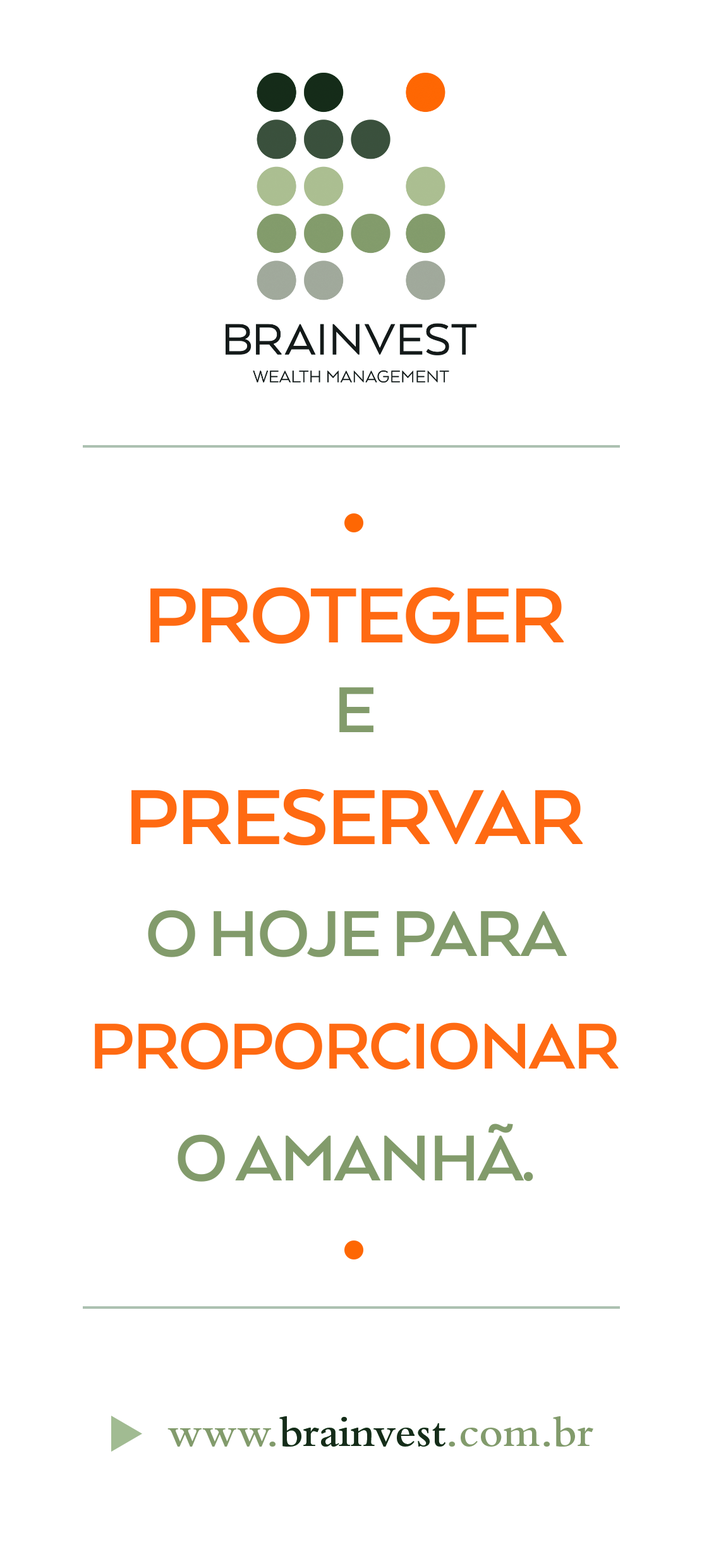
<style>
.page{position:relative;width:709px;height:1568px;background:#ffffff}
.page>*{position:absolute;margin:0}
.t1{font:74.7px/112px "ArquitectaBold";letter-spacing:-0.025em;color:#ff6a12;text-transform:uppercase}
.t2{font:59.7px/74.7px "BemboStd";color:#839c6c}
.t3{font:89.6px/89.6px "ArquitectaBold";letter-spacing:-0.025em;color:#ff6a12;text-transform:uppercase}
.t4{font:74.7px/89.6px "ArquitectaBold";letter-spacing:-0.025em;color:#839c6c;text-transform:uppercase}
.t5{font:89.6px/112px "ArquitectaBold";letter-spacing:-0.025em;color:#ff6a12;text-transform:uppercase}
.t6{font:74.7px/112px "ArquitectaBold";letter-spacing:-0.025em;color:#839c6c;text-transform:uppercase}
.t7{font:44.8px "BemboStd-Semibold";color:#152c19}
.t8{font:44.8px "BemboStd-Semibold";color:#839c6c}
</style>
<div class="page">
<p class="t1" style="left:95px;top:587px;width:524px;height:595px;text-align:center"><span class="t2"><br><br><br></span><span class="t3">PROTEGER <br></span><span class="t4">e<br></span><span class="t5">PRESERVAR <br></span><span class="t6">O HOJE PARA </span>PROPORCIONAR <span class="t6">O AMANHÃ.</span></p>
<p class="t7" style="left:168px;top:1416px;width:426px;height:31px"><span class="t8">www.</span>brainvest<span class="t8">.com.br</span></p>
</div>
